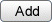
<style>
.page{position:relative;width:52px;height:22px}
.page>*{position:absolute;margin:0}
.t1{font:14px "ArialMT";letter-spacing:0.075em;color:#000000}
</style>
<div class="page">
<p class="t1" style="left:15px;top:6px;width:24px;height:10px">Add</p>
</div>
